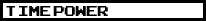
<style>
.page{position:relative;width:206px;height:21px;background:#ffffff}
.page>*{position:absolute;margin:0}
.t1{font:20px "ArcadeClassic";color:#000000}
</style>
<div class="page">
<p class="t1" style="left:6px;top:6px;width:102px;height:10px">Time Power</p>
</div>
